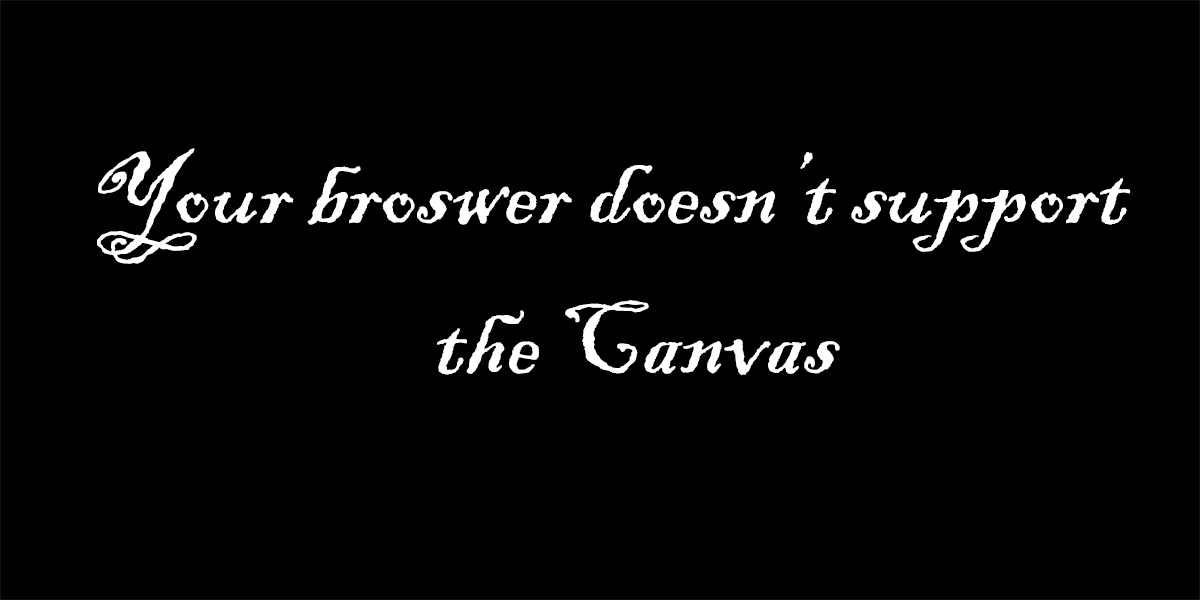
<style>
.page{position:relative;width:1200px;height:600px;background:#000000}
.page>*{position:absolute;margin:0}
.t1{font:108px "BlackadderITC-Regular";color:#ffffff}
</style>
<div class="page">
<p class="t1" style="left:97px;top:148px;width:1034px;height:116px">Your broswer doesn’t support</p>
<p class="t1" style="left:437px;top:300px;width:403px;height:76px">the Canvas</p>
</div>
